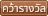
<style>
.page{position:relative;width:48px;height:16px}
.page>*{position:absolute;margin:0}
.t1{font:11px "NotoSansThai-Regular";color:#ffffff}
</style>
<div class="page">
<p class="t1" style="left:3px;top:2px;width:43px;height:10px">คว้ารางวัล</p>
</div>
